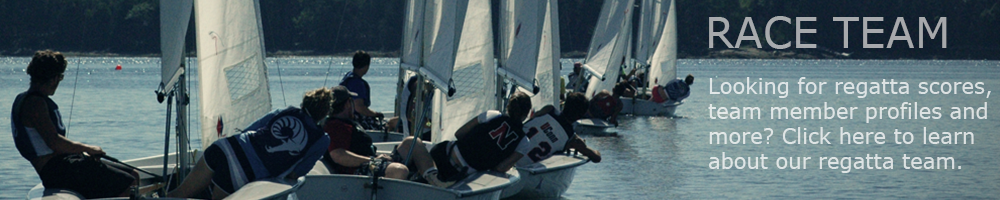
<style>
.page{position:relative;width:1000px;height:200px}
.page>*{position:absolute;margin:0}
.t1{font:42.1px "Verdana";color:#a7a9ac}
.t2{font:21px "Verdana";color:#dde3e4}
</style>
<div class="page">
<p class="t1" style="left:709px;top:16px;width:238px;height:33px">RACE TEAM</p>
<p class="t2" style="left:708px;top:77px;width:283px;height:96px">Looking for regatta scores,<br>team member profiles and <br>more? Click here to learn<br>about our regatta team.</p>
</div>
